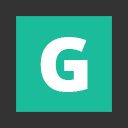
<style>
.page{position:relative;width:128px;height:128px;background:#333333}
.page>*{position:absolute;margin:0}
.t1{font:75px "OpenSans-Extrabold";color:#ffffff}
</style>
<div class="page">
<p class="t1" style="left:40px;top:37px;width:48px;height:55px">G</p>
</div>
